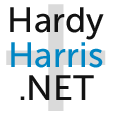
<style>
.page{position:relative;width:114px;height:114px;background:#ffffff}
.page>*{position:absolute;margin:0}
.t1{font:35px "MuseoSans-500";color:#121212}
.t2{font:35px "MuseoSans-500";color:#0086c4}
</style>
<div class="page">
<p class="t1" style="left:10px;top:7px;width:94px;height:33px">Hardy</p>
<p class="t2" style="left:11px;top:42px;width:92px;height:26px">Harris</p>
<p class="t1" style="left:20px;top:75px;width:74px;height:25px">.NET</p>
</div>
